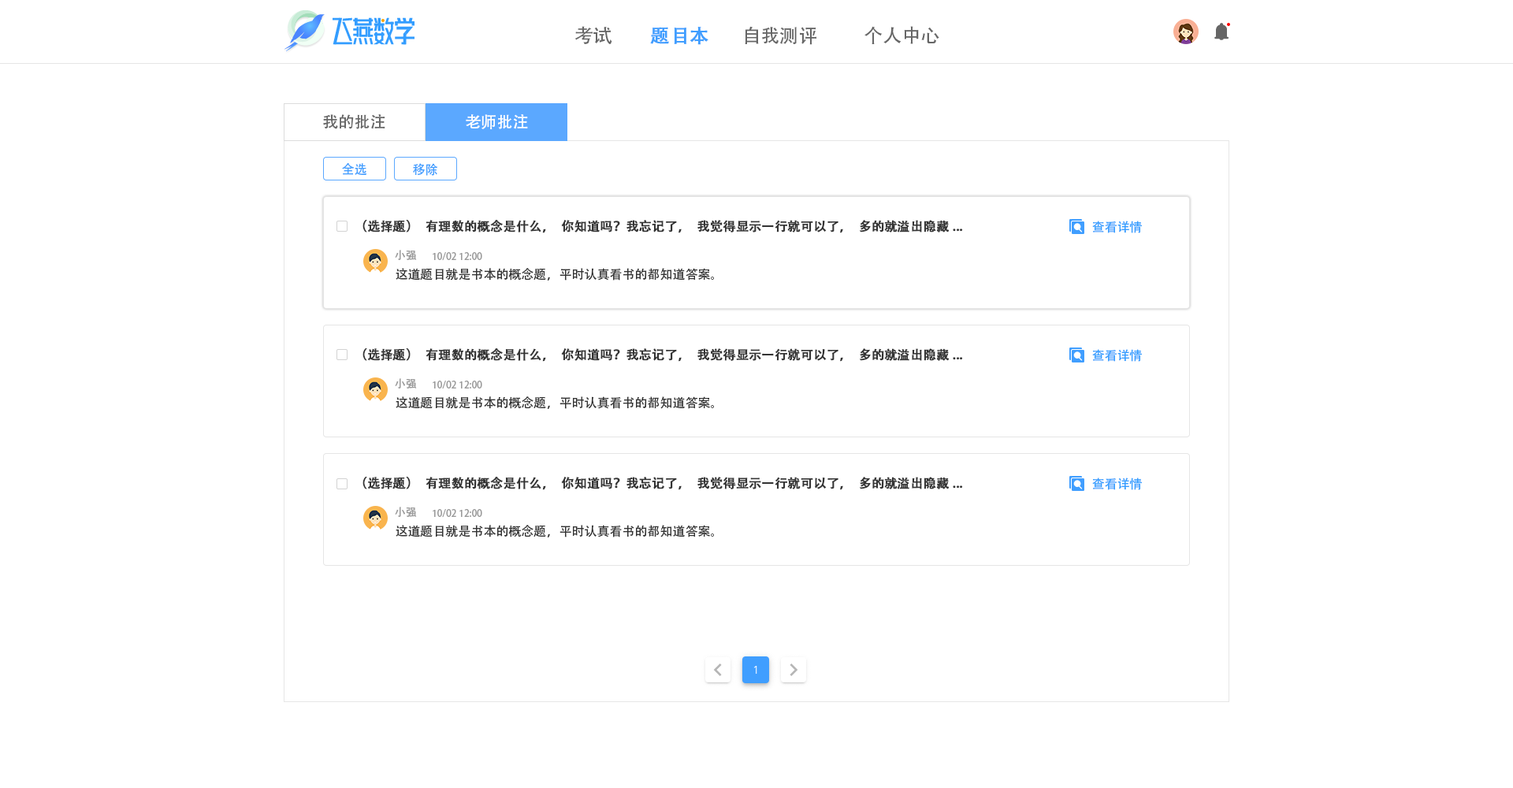
<style>
.page{position:relative;width:1513px;height:788px;background:#ffffff}
.page>*{position:absolute;margin:0}
.t1{font:18.9px "AdobeHeitiStd-Regular";color:#666666}
.t2{font:18.9px "AdobeHeitiStd-Regular";color:#409eff;font-weight:bold}
.t3{font:15.8px "AdobeHeitiStd-Regular";color:#666666}
.t4{font:15.8px "AdobeHeitiStd-Regular";color:#ffffff}
.t5{font:12.6px "AdobeHeitiStd-Regular";color:#409eff}
.t6{font:12.6px "AdobeHeitiStd-Regular";color:#333333;font-weight:bold}
.t7{font:12.6px "AdobeHeitiStd-Regular";color:#339dff}
.t8{font:11px "AdobeHeitiStd-Regular";color:#999999}
.t9{font:9.5px "AdobeHeitiStd-Regular";color:#999999}
.t10{font:12.6px "AdobeHeitiStd-Regular";color:#333333}
</style>
<div class="page">
<p class="t1" style="left:575px;top:26px;width:37px;height:18px">考试</p>
<p class="t2" style="left:650px;top:27px;width:58px;height:18px">题目本</p>
<p class="t1" style="left:745px;top:26px;width:71px;height:19px">自我测评</p>
<p class="t1" style="left:865px;top:26px;width:74px;height:18px">个人中心</p>
<p class="t3" style="left:323px;top:114px;width:62px;height:15px">我的批注</p>
<p class="t4" style="left:466px;top:114px;width:62px;height:15px">老师批注</p>
<p class="t5" style="left:342px;top:163px;width:24px;height:12px">全选</p>
<p class="t5" style="left:413px;top:163px;width:25px;height:13px">移除</p>
<p class="t6" style="left:363px;top:219px;width:600px;height:14px">（选择题）有理数的概念是什么，你知道吗？我忘记了，我觉得显示一行就可以了，多的就溢出隐藏...</p>
<p class="t7" style="left:1092px;top:221px;width:50px;height:12px">查看详情</p>
<p class="t8" style="left:395px;top:250px;width:22px;height:10px">小强</p>
<p class="t9" style="left:433px;top:252px;width:49px;height:9px">10/02 12:00</p>
<p class="t10" style="left:396px;top:268px;width:318px;height:13px">这道题目就是书本的概念题，平时认真看书的都知道答案。</p>
<p class="t6" style="left:363px;top:348px;width:600px;height:14px">（选择题）有理数的概念是什么，你知道吗？我忘记了，我觉得显示一行就可以了，多的就溢出隐藏...</p>
<p class="t7" style="left:1092px;top:349px;width:50px;height:13px">查看详情</p>
<p class="t8" style="left:395px;top:378px;width:22px;height:11px">小强</p>
<p class="t9" style="left:433px;top:381px;width:49px;height:8px">10/02 12:00</p>
<p class="t10" style="left:396px;top:396px;width:318px;height:13px">这道题目就是书本的概念题，平时认真看书的都知道答案。</p>
<p class="t6" style="left:363px;top:476px;width:600px;height:14px">（选择题）有理数的概念是什么，你知道吗？我忘记了，我觉得显示一行就可以了，多的就溢出隐藏...</p>
<p class="t7" style="left:1092px;top:478px;width:50px;height:12px">查看详情</p>
<p class="t8" style="left:395px;top:507px;width:22px;height:10px">小强</p>
<p class="t9" style="left:433px;top:509px;width:49px;height:9px">10/02 12:00</p>
<p class="t10" style="left:396px;top:525px;width:318px;height:12px">这道题目就是书本的概念题，平时认真看书的都知道答案。</p>
</div>
